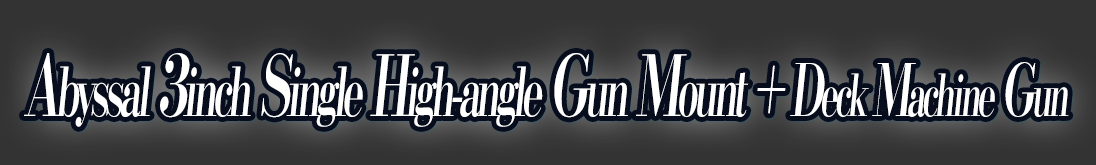
<style>
.page{position:relative;width:1096px;height:165px;background:#333333}
.page>*{position:absolute;margin:0}
.t1{font:67.2px "KochoStd-Heavy";letter-spacing:-0.11em;color:#ffffff;font-style:italic;scale:0.58 1}
.t2{font:84px "KochoStd-Heavy";letter-spacing:-0.11em;color:#ffffff;font-style:italic;scale:0.58 1}
.t3{font:72px "KochoStd-Heavy";letter-spacing:-0.11em;color:#ffffff;font-style:italic;scale:0.58 1}
.t4{font:57.6px "KochoStd-Heavy";letter-spacing:-0.11em;color:#ffffff;font-style:italic;scale:0.58 1}
</style>
<div class="page">
<p class="t1" style="left:24px;top:53px;width:1045px;height:74px"><span class="t2">A</span>byssal<span class="t2"> 3</span>inch<span class="t2"> S</span>ingle<span class="t2"> H</span>igh-angle<span class="t2"> G</span>un<span class="t2"> M</span>ount <span class="t3">+ D</span><span class="t4">eck </span><span class="t3">M</span><span class="t4">achine</span><span class="t3"> G</span><span class="t4">un</span></p>
</div>
